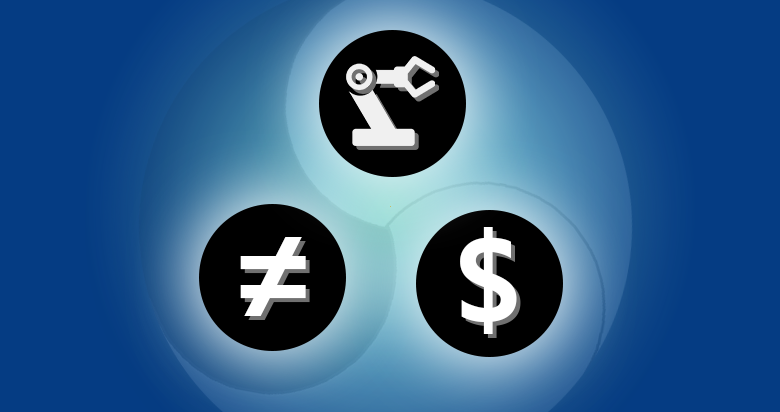
<style>
.page{position:relative;width:780px;height:412px;background:#053c83}
.page>*{position:absolute;margin:0}
.t1{font:119.8px "LaoUI-Bold";color:#ffffff}
.t2{font:136.2px "LaoUI-Bold";color:#ffffff}
</style>
<div class="page">
<p class="t1" style="left:460px;top:227px;width:57px;height:107px">$</p>
<p class="t2" style="left:240px;top:237px;width:66px;height:79px">≠</p>
</div>
